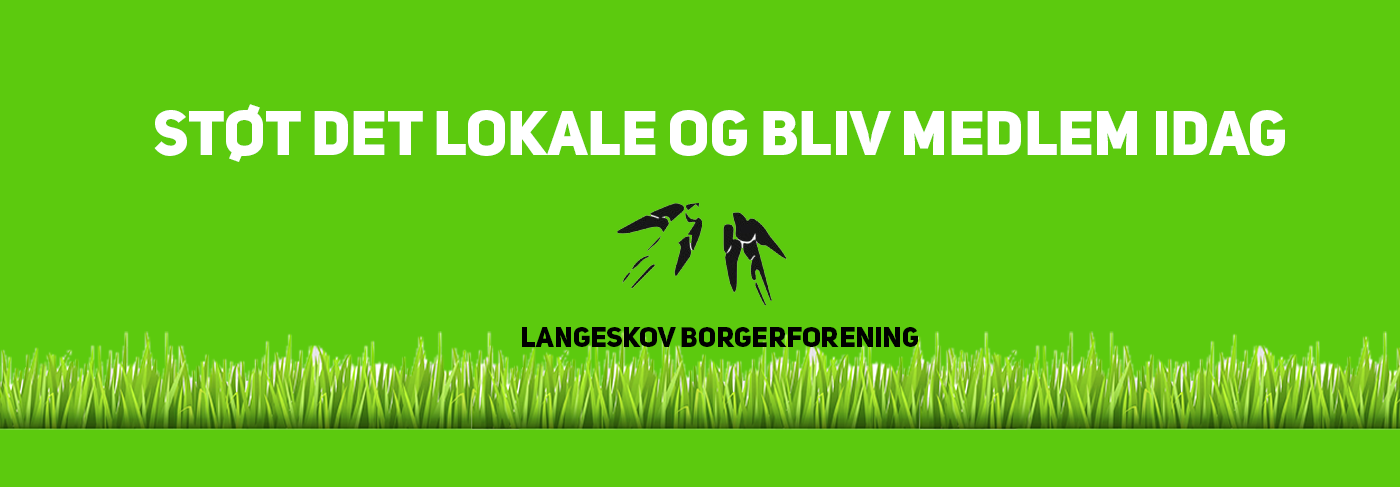
<style>
.page{position:relative;width:1400px;height:487px;background:#5cca0e}
.page>*{position:absolute;margin:0}
.t1{font:62px/66px "UniSansHeavyCAPS";color:#ffffff}
.t2{font:28px/48px "UniSansHeavyCAPS";color:#000000}
</style>
<div class="page">
<p class="t1" style="left:154px;top:104px;width:1131px;height:243px;text-align:center">STØT DET LOKALE OG BLIV MEDLEM IDAG<br><span class="t2"><br><br><br>LANGESKOV Borgerforening</span></p>
</div>
